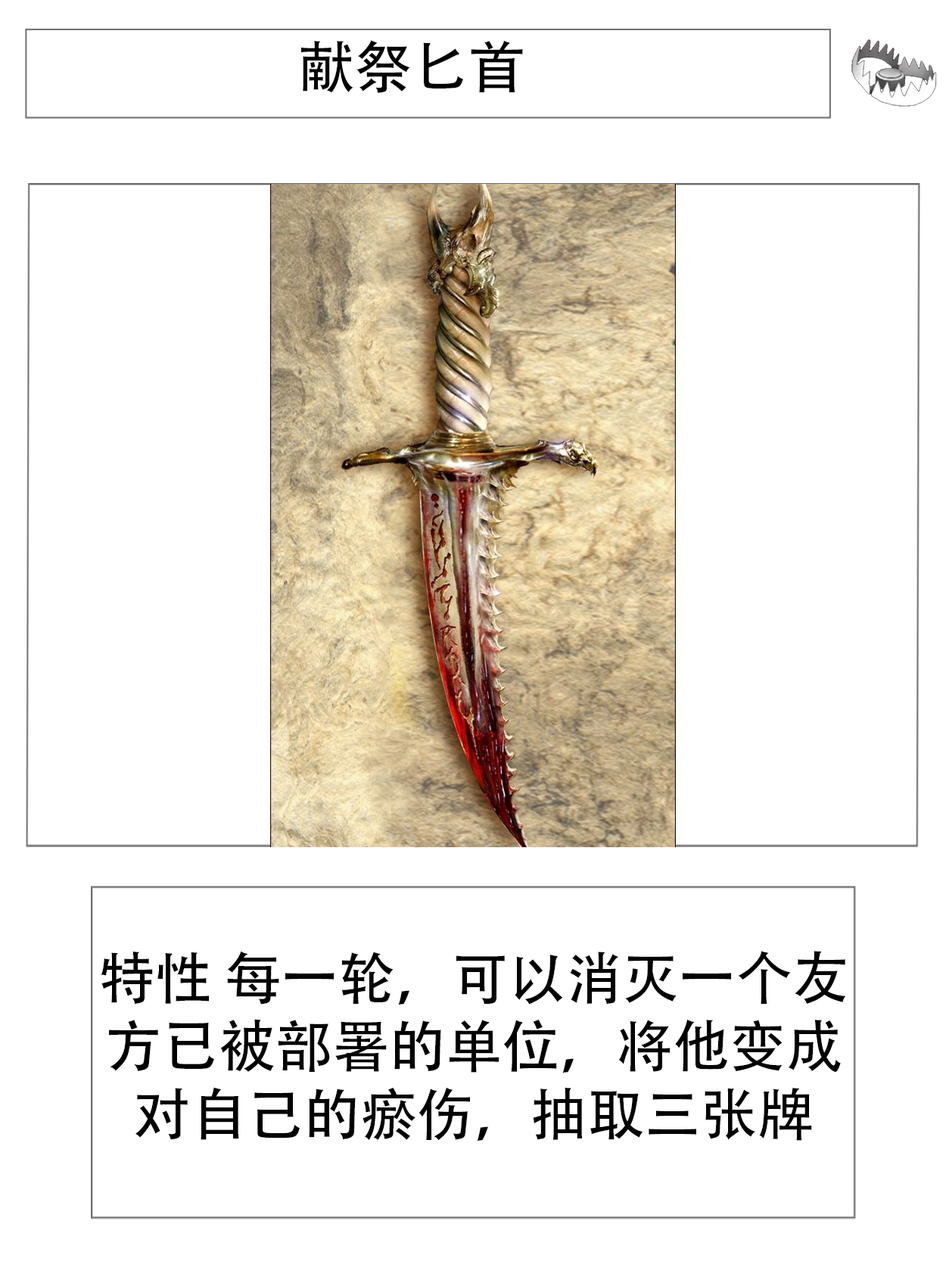
<style>
.page{position:relative;width:946px;height:1261px;background:#ffffff}
.page>*{position:absolute;margin:0}
.t1{font:56.7px "AdobeHeitiStd-Regular";color:#000000}
</style>
<div class="page">
<p class="t1" style="left:301px;top:40px;width:222px;height:53px">献祭匕首</p>
<p class="t1" style="left:101px;top:951px;width:745px;height:190px;text-align:center">特性 每一轮，可以消灭一个友方已被部署的单位，将他变成对自己的瘀伤，抽取三张牌</p>
</div>
